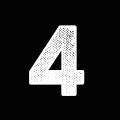
<style>
.page{position:relative;width:120px;height:120px;background:#030303}
.page>*{position:absolute;margin:0}
.t1{font:140px "StampborGrungeRussian";letter-spacing:0.01em;color:#ffffff}
</style>
<div class="page">
<p class="t1" style="left:29px;top:25px;width:56px;height:71px">4</p>
</div>
